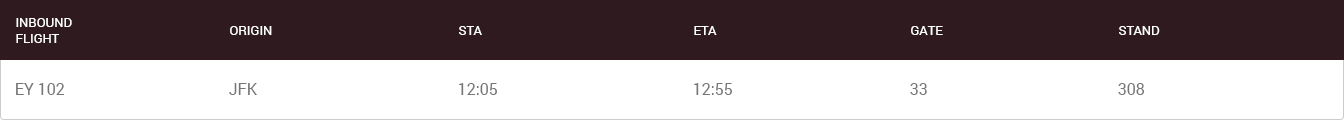
<style>
.page{position:relative;width:1344px;height:120px;background:#2f1b1f}
.page>*{position:absolute;margin:0}
.t1{font:13px "Roboto-Regular";color:#ffffff;text-transform:uppercase}
.t2{font:16px "Roboto-Regular";color:#767676}
</style>
<div class="page">
<p class="t1" style="left:16px;top:18px;width:56px;height:25px">Inbound<br>Flight</p>
<p class="t1" style="left:230px;top:26px;width:42px;height:9px">Origin</p>
<p class="t1" style="left:459px;top:26px;width:23px;height:9px">STA</p>
<p class="t1" style="left:694px;top:26px;width:23px;height:9px">ETA</p>
<p class="t1" style="left:911px;top:26px;width:32px;height:9px">Gate</p>
<p class="t1" style="left:1119px;top:26px;width:41px;height:9px">Stand</p>
<p class="t2" style="left:16px;top:83px;width:49px;height:12px">EY 102</p>
<p class="t2" style="left:229px;top:83px;width:28px;height:12px">JFK</p>
<p class="t2" style="left:459px;top:83px;width:38px;height:12px">12:05</p>
<p class="t2" style="left:694px;top:83px;width:38px;height:12px">12:55</p>
<p class="t2" style="left:910px;top:83px;width:17px;height:12px">33</p>
<p class="t2" style="left:1118px;top:83px;width:27px;height:12px">308</p>
</div>
